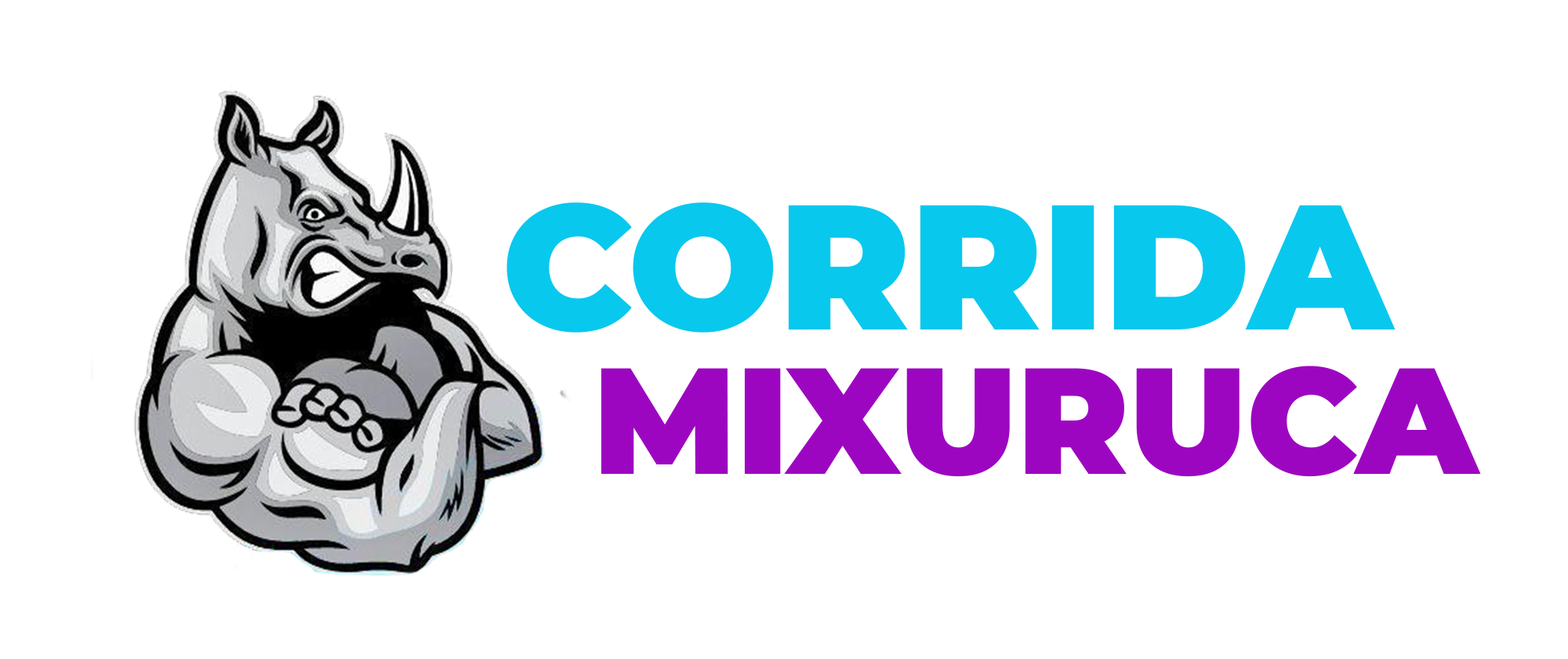
<style>
.page{position:relative;width:1568px;height:659px;background:#ffffff}
.page>*{position:absolute;margin:0}
.t1{font:177.1px "Montserrat-Black";color:#08c8ee}
.t2{font:150.4px "Montserrat-Black";color:#9e06c1}
</style>
<div class="page">
<p class="t1" style="left:506px;top:202px;width:890px;height:130px">CORRIDA</p>
<p class="t2" style="left:601px;top:365px;width:880px;height:112px">MIXURUCA</p>
</div>
